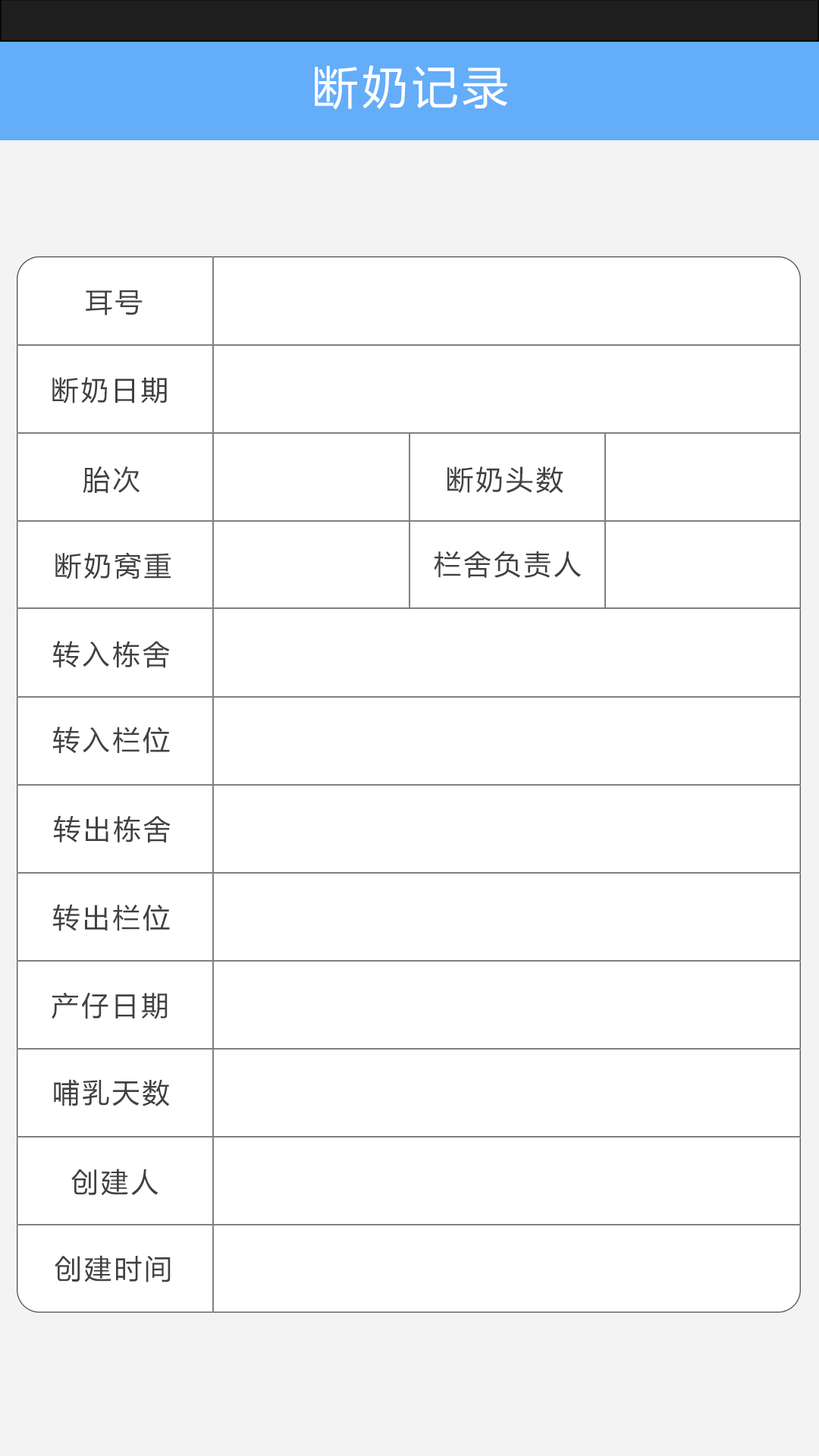
<style>
.page{position:relative;width:819px;height:1456px;background:#ffffff}
.page>*{position:absolute;margin:0}
.t1{font:45.5px "MicrosoftYaHei";letter-spacing:0.1em;color:#ffffff}
.t2{font:27.3px "MicrosoftYaHei";letter-spacing:0.1em;color:#414141}
</style>
<div class="page">
<p class="t1" style="left:315px;top:65px;width:192px;height:45px">断奶记录</p>
<p class="t2" style="left:86px;top:290px;width:57px;height:25px">耳号</p>
<p class="t2" style="left:52px;top:377px;width:115px;height:26px">断奶日期</p>
<p class="t2" style="left:83px;top:466px;width:57px;height:28px">胎次</p>
<p class="t2" style="left:447px;top:466px;width:116px;height:28px">断奶头数</p>
<p class="t2" style="left:55px;top:552px;width:116px;height:27px">断奶窝重</p>
<p class="t2" style="left:434px;top:551px;width:147px;height:27px">栏舍负责人</p>
<p class="t2" style="left:52px;top:641px;width:118px;height:27px">转入栋舍</p>
<p class="t2" style="left:52px;top:726px;width:118px;height:28px">转入栏位</p>
<p class="t2" style="left:53px;top:815px;width:118px;height:27px">转出栋舍</p>
<p class="t2" style="left:52px;top:904px;width:118px;height:27px">转出栏位</p>
<p class="t2" style="left:52px;top:992px;width:116px;height:27px">产仔日期</p>
<p class="t2" style="left:54px;top:1079px;width:116px;height:27px">哺乳天数</p>
<p class="t2" style="left:71px;top:1169px;width:87px;height:27px">创建人</p>
<p class="t2" style="left:55px;top:1255px;width:116px;height:27px">创建时间</p>
</div>
